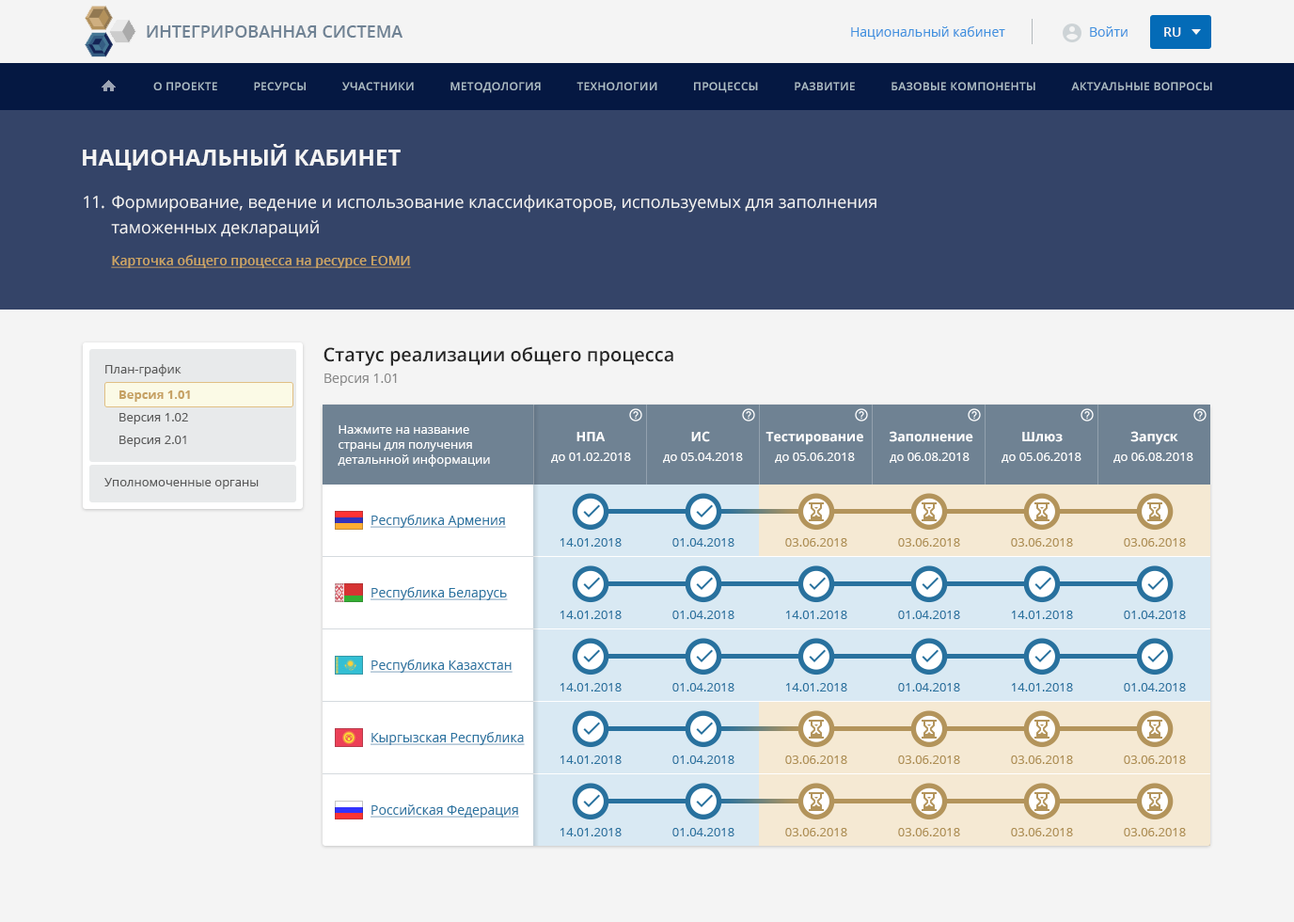
<style>
.page{position:relative;width:1294px;height:922px;background:#f4f4f4}
.page>*{position:absolute;margin:0}
.t1{font:16.9px "OpenSans-Semibold";color:#6f8294;text-transform:uppercase}
.t2{font:13.2px "OpenSans";color:#4292df}
.t3{font:13.2px "OpenSans-Semibold";color:#f4f4f4}
.t4{font:11.3px "OpenSans-Semibold";letter-spacing:0.025em;color:#acbdc7;text-transform:uppercase}
.t5{font:22.6px "OpenSans-Bold";color:#f4f4f4;text-transform:uppercase}
.t6{font:16.9px "OpenSans";letter-spacing:-0.025em;color:#f4f4f4}
.t7{font:16.9px/25.4px "OpenSans";color:#f4f4f4}
.t8{font:13.2px "OpenSans-Semibold";color:#cea663;text-decoration:underline}
.t9{font:18.8px "OpenSans-Semibold";color:#262626}
.t10{font:12.2px "OpenSans";color:#595959}
.t11{font:13.2px "OpenSans";color:#898989}
.t12{font:12.2px/22.6px "OpenSans";color:#595959}
.t13{font:12.2px/22.6px "OpenSans-Bold";color:#c6a163}
.t14{font:12.2px/15px "OpenSans";color:#ffffff}
.t15{font:13.2px "OpenSans-Bold";color:#ffffff}
.t16{font:12.2px "OpenSans";color:#ffffff}
.t17{font:13.2px "OpenSans";color:#2b74a1;text-decoration:underline}
.t18{font:12.2px "OpenSans";color:#29729f}
.t19{font:12.2px "OpenSans";color:#ae8e52}
</style>
<div class="page">
<p class="t1" style="left:147px;top:25px;width:255px;height:13px">Интегрированная система</p>
<p class="t2" style="left:851px;top:26px;width:154px;height:13px">Национальный кабинет</p>
<p class="t2" style="left:1090px;top:26px;width:37px;height:11px">Войти</p>
<p class="t3" style="left:1164px;top:27px;width:17px;height:10px">RU</p>
<p class="t4" style="left:153px;top:82px;width:1059px;height:11px">О проекте           Ресурсы           Участники           Методология           Технологии           Процессы           Развитие           Базовые компоненты           Актуальные вопросы</p>
<p class="t5" style="left:83px;top:144px;width:318px;height:26px">Национальный кабинет</p>
<p class="t6" style="left:84px;top:196px;width:20px;height:13px">11.</p>
<p class="t7" style="left:111px;top:195px;width:765px;height:43px">Формирование, ведение и использование классификаторов, используемых для заполнения таможенных деклараций</p>
<p class="t8" style="left:111px;top:255px;width:300px;height:13px">Карточка общего процесса на ресурсе ЕОМИ</p>
<p class="t9" style="left:323px;top:346px;width:350px;height:20px">Статус реализации общего процесса</p>
<p class="t10" style="left:105px;top:364px;width:76px;height:12px">План-график</p>
<p class="t11" style="left:324px;top:373px;width:73px;height:13px">Версия 1.01</p>
<p class="t12" style="left:119px;top:390px;width:71px;height:57px"><span class="t13">Версия 1.01<br></span>Версия 1.02<br>Версия 2.01</p>
<p class="t14" style="left:338px;top:425px;width:152px;height:41px">Нажмите на название страны для получения детальнной информации</p>
<p class="t15" style="left:576px;top:432px;width:30px;height:9px">НПА</p>
<p class="t15" style="left:691px;top:431px;width:19px;height:11px">ИС</p>
<p class="t15" style="left:765px;top:432px;width:98px;height:13px">Тестирование</p>
<p class="t15" style="left:890px;top:431px;width:83px;height:11px">Заполнение</p>
<p class="t15" style="left:1022px;top:432px;width:41px;height:10px">Шлюз</p>
<p class="t15" style="left:1130px;top:431px;width:48px;height:14px">Запуск</p>
<p class="t16" style="left:551px;top:452px;width:80px;height:11px">до 01.02.2018</p>
<p class="t16" style="left:663px;top:452px;width:80px;height:11px">до 05.04.2018</p>
<p class="t16" style="left:775px;top:452px;width:80px;height:11px">до 05.06.2018</p>
<p class="t16" style="left:890px;top:452px;width:80px;height:11px">до 06.08.2018</p>
<p class="t16" style="left:1001px;top:452px;width:80px;height:11px">до 05.06.2018</p>
<p class="t16" style="left:1113px;top:452px;width:80px;height:11px">до 06.08.2018</p>
<p class="t10" style="left:104px;top:478px;width:155px;height:11px">Уполномоченные органы</p>
<p class="t17" style="left:371px;top:514px;width:135px;height:14px">Республика Армения</p>
<p class="t18" style="left:560px;top:538px;width:62px;height:8px">14.01.2018</p>
<p class="t18" style="left:672px;top:538px;width:62px;height:8px">01.04.2018</p>
<p class="t19" style="left:785px;top:538px;width:62px;height:8px">03.06.2018</p>
<p class="t19" style="left:898px;top:538px;width:62px;height:8px">03.06.2018</p>
<p class="t19" style="left:1011px;top:538px;width:62px;height:8px">03.06.2018</p>
<p class="t19" style="left:1124px;top:538px;width:62px;height:8px">03.06.2018</p>
<p class="t17" style="left:371px;top:587px;width:137px;height:13px">Республика Беларусь</p>
<p class="t18" style="left:560px;top:610px;width:62px;height:9px">14.01.2018</p>
<p class="t18" style="left:672px;top:610px;width:62px;height:9px">01.04.2018</p>
<p class="t18" style="left:785px;top:610px;width:62px;height:9px">14.01.2018</p>
<p class="t18" style="left:898px;top:610px;width:62px;height:9px">01.04.2018</p>
<p class="t18" style="left:1011px;top:610px;width:62px;height:9px">14.01.2018</p>
<p class="t18" style="left:1124px;top:610px;width:62px;height:9px">01.04.2018</p>
<p class="t17" style="left:371px;top:659px;width:141px;height:13px">Республика Казахстан</p>
<p class="t18" style="left:560px;top:683px;width:62px;height:8px">14.01.2018</p>
<p class="t18" style="left:672px;top:683px;width:62px;height:8px">01.04.2018</p>
<p class="t18" style="left:785px;top:683px;width:62px;height:8px">14.01.2018</p>
<p class="t18" style="left:898px;top:683px;width:62px;height:8px">01.04.2018</p>
<p class="t18" style="left:1011px;top:683px;width:62px;height:8px">14.01.2018</p>
<p class="t18" style="left:1124px;top:683px;width:62px;height:8px">01.04.2018</p>
<p class="t17" style="left:371px;top:732px;width:154px;height:13px">Кыргызская Республика</p>
<p class="t18" style="left:560px;top:755px;width:62px;height:9px">14.01.2018</p>
<p class="t18" style="left:672px;top:755px;width:62px;height:9px">01.04.2018</p>
<p class="t19" style="left:785px;top:755px;width:62px;height:9px">03.06.2018</p>
<p class="t19" style="left:898px;top:755px;width:62px;height:9px">03.06.2018</p>
<p class="t19" style="left:1011px;top:755px;width:62px;height:9px">03.06.2018</p>
<p class="t19" style="left:1124px;top:755px;width:62px;height:9px">03.06.2018</p>
<p class="t17" style="left:371px;top:804px;width:148px;height:13px">Российская Федерация</p>
<p class="t18" style="left:560px;top:828px;width:62px;height:8px">14.01.2018</p>
<p class="t18" style="left:672px;top:828px;width:62px;height:8px">01.04.2018</p>
<p class="t19" style="left:785px;top:828px;width:62px;height:8px">03.06.2018</p>
<p class="t19" style="left:898px;top:828px;width:62px;height:8px">03.06.2018</p>
<p class="t19" style="left:1011px;top:828px;width:62px;height:8px">03.06.2018</p>
<p class="t19" style="left:1124px;top:828px;width:62px;height:8px">03.06.2018</p>
</div>
